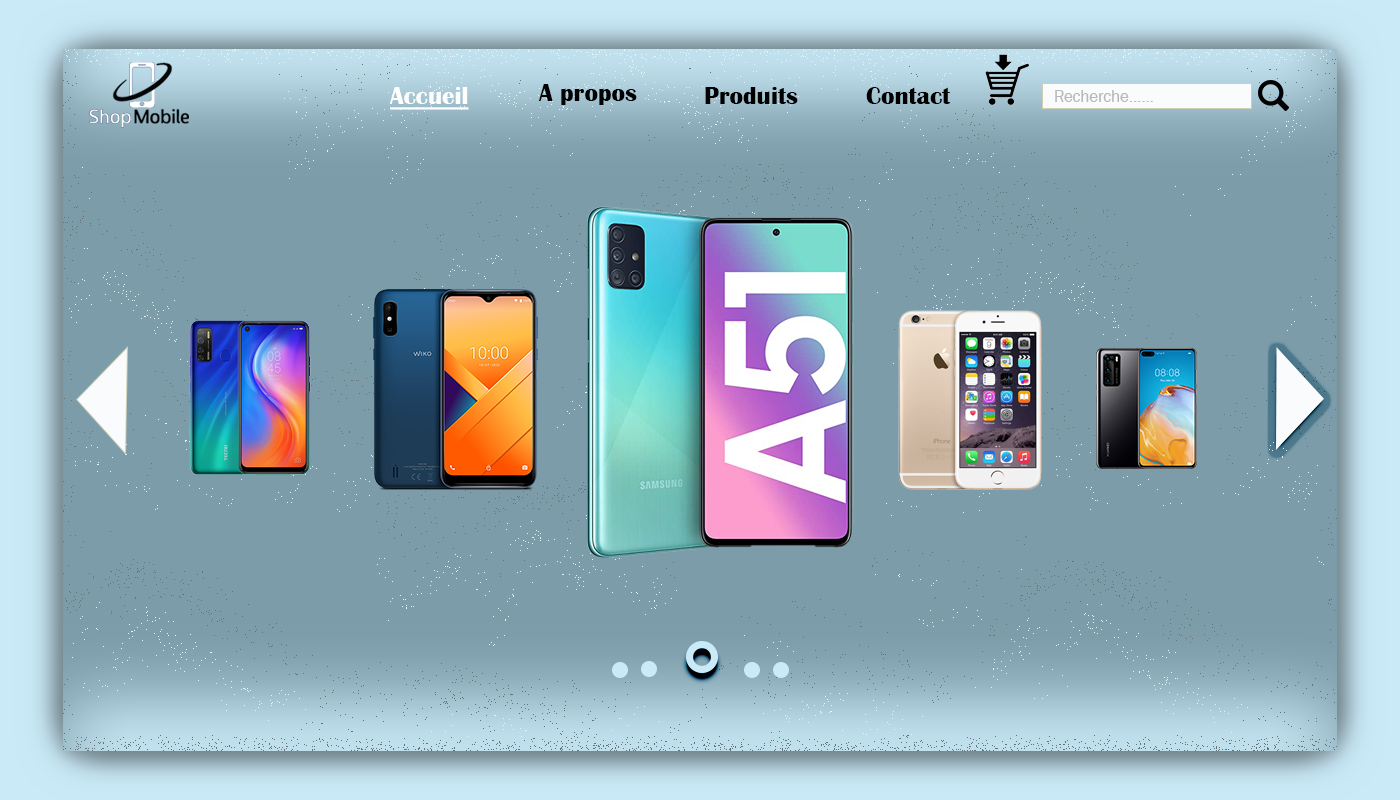
<style>
.page{position:relative;width:1400px;height:800px;background:#7c9caa}
.page>*{position:absolute;margin:0}
.t1{font:25px "BritannicBold";color:#fefefe;text-decoration:underline}
.t2{font:25px "BritannicBold";color:#000000}
.t3{font:16.7px "FranklinGothic-Book";color:#b7b8b9}
</style>
<div class="page">
<p class="t1" style="left:389px;top:86px;width:80px;height:24px">Accueil</p>
<p class="t2" style="left:538px;top:84px;width:99px;height:21px">A propos</p>
<p class="t2" style="left:705px;top:86px;width:93px;height:18px">Produits</p>
<p class="t2" style="left:866px;top:87px;width:85px;height:17px">Contact</p>
<p class="t3" style="left:1055px;top:90px;width:98px;height:12px">Recherche......</p>
</div>
